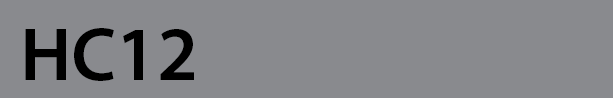
<style>
.page{position:relative;width:613px;height:98px;background:#898a8e}
.page>*{position:absolute;margin:0}
.t1{font:76.4px "MyriadPro-Semibold";color:#000000}
</style>
<div class="page">
<p class="t1" style="left:25px;top:28px;width:169px;height:53px">HC12</p>
</div>
